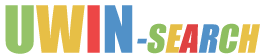
<style>
.page{position:relative;width:265px;height:55px;background:#ffffff}
.page>*{position:absolute;margin:0}
.t1{font:60px "Impact";color:#89bd58}
.t2{font:60px "Impact";color:#e4b832}
.t3{font:60px "Impact";color:#eb3232}
.t4{font:60px "Impact";color:#3e85c2}
.t5{font:36px "Impact";color:#3e85c2;font-style:italic}
.t6{font:36px "Impact";color:#82b74f;font-style:italic}
.t7{font:36px "Impact";color:#e3b732;font-style:italic}
.t8{font:36px "Impact";color:#db2d2d;font-style:italic}
.t9{font:36px "Impact";color:#e6ba33;font-style:italic}
</style>
<div class="page">
<p class="t1" style="left:5px;top:5px;width:255px;height:49px">U<span class="t2">W</span><span class="t3">I</span><span class="t4">N</span><span class="t5">-</span><span class="t6">S</span><span class="t7">E</span><span class="t8">A</span><span class="t5">R</span><span class="t6">C</span><span class="t9">H</span></p>
</div>
